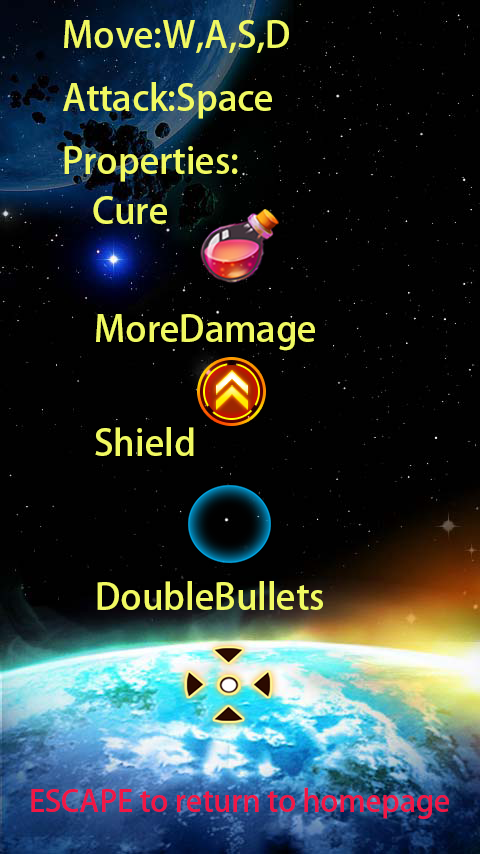
<style>
.page{position:relative;width:480px;height:854px;background:#010101}
.page>*{position:absolute;margin:0}
.t1{font:36px "AdobeHeitiStd-Regular";color:#f0f961}
.t2{font:30px "AdobeHeitiStd-Regular";color:#f21644}
</style>
<div class="page">
<p class="t1" style="left:63px;top:20px;width:226px;height:162px">Move:W,A,S,D<br>Attack:Space<br>Properties:</p>
<p class="t1" style="left:93px;top:196px;width:74px;height:28px">Cure</p>
<p class="t1" style="left:96px;top:314px;width:219px;height:37px">MoreDamage</p>
<p class="t1" style="left:95px;top:427px;width:99px;height:29px">Shield</p>
<p class="t1" style="left:97px;top:581px;width:226px;height:29px">DoubleBullets</p>
<p class="t2" style="left:31px;top:787px;width:418px;height:32px">ESCAPE to return to homepage</p>
</div>
